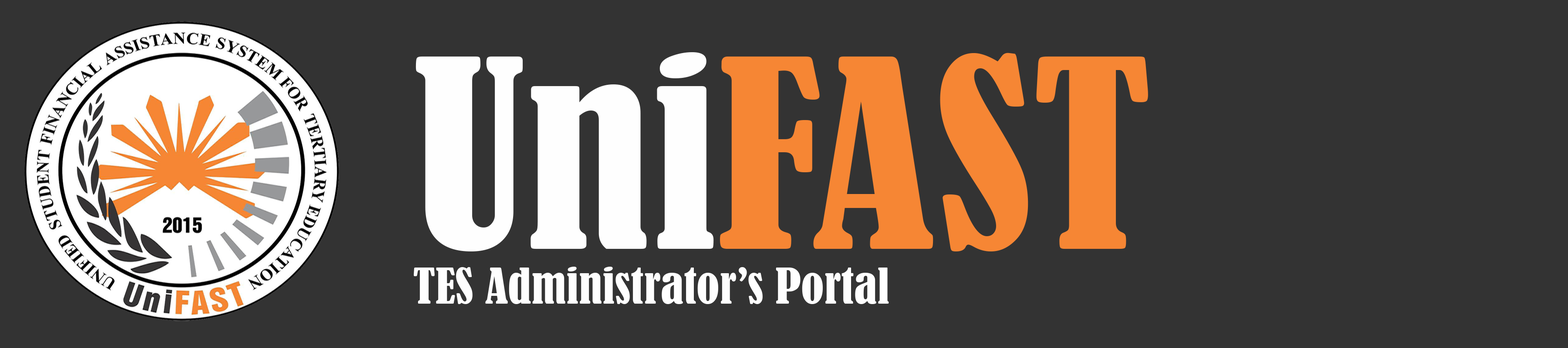
<style>
.page{position:relative;width:1568px;height:348px;background:#333333}
.page>*{position:absolute;margin:0}
.t1{font:45.6px "BernardMT-Condensed";color:#fefefe;scale:1.05 1}
.t2{font:244.5px "BernardMT-Condensed";color:#fefefe;scale:1.05 1}
.t3{font:244.5px "BernardMT-Condensed";color:#f68634;scale:1.05 1}
</style>
<div class="page">
<p class="t1" style="left:413px;top:52px;width:735px;height:252px"><span class="t2">Uni</span><span class="t3">FAST <br></span>TES Administrator’s Portal</p>
</div>
